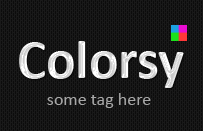
<style>
.page{position:relative;width:203px;height:131px;background:#191919}
.page>*{position:absolute;margin:0}
.t1{font:55px "Calibri-Bold"}
.t2{font:18px "Calibri";color:#a7a7a7}
</style>
<div class="page">
<p class="t1" style="left:19px;top:41px;width:165px;height:47px">Colorsy</p>
<p class="t2" style="left:47px;top:93px;width:104px;height:15px">some tag here</p>
</div>
